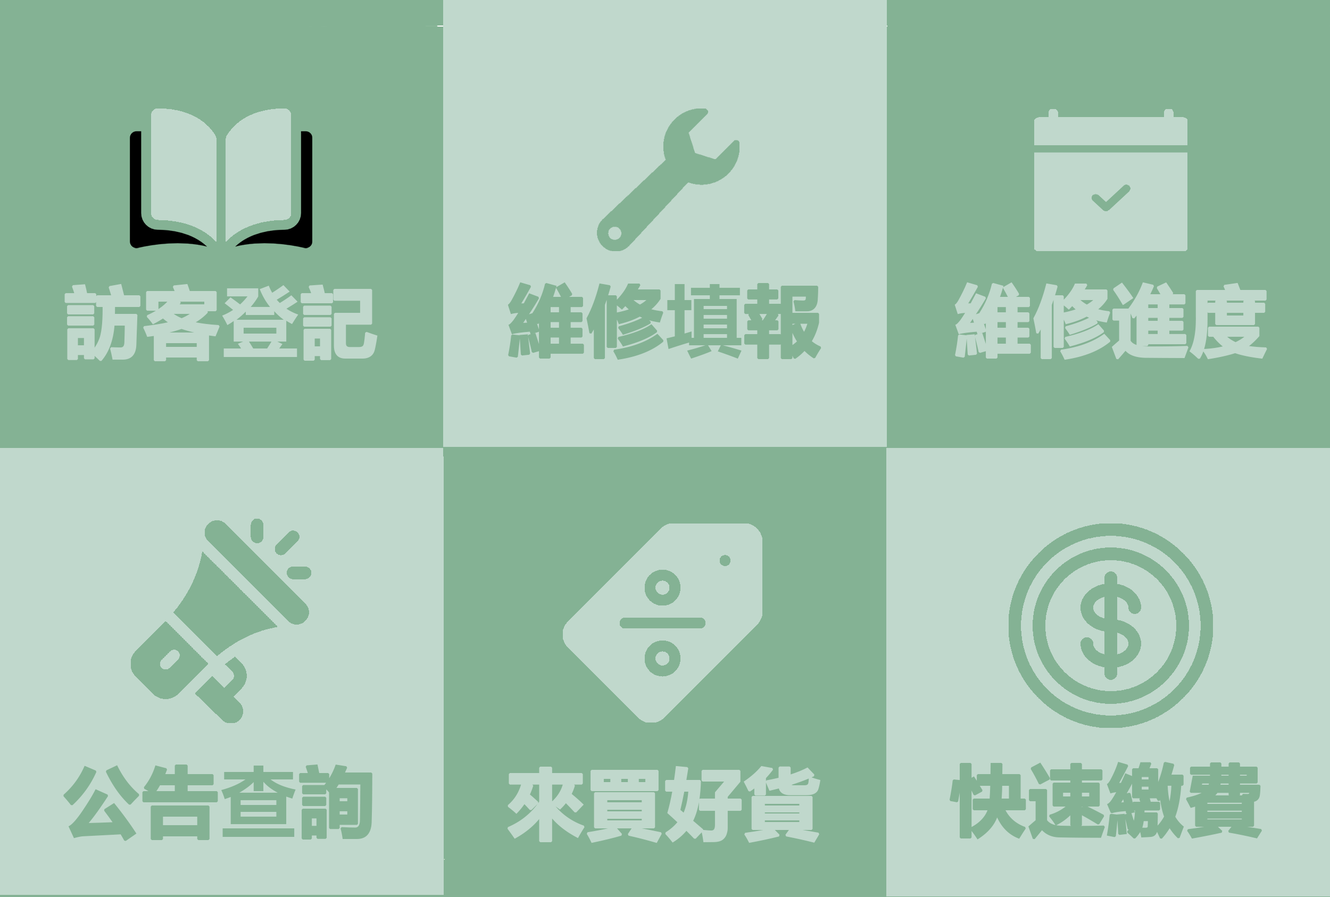
<style>
.page{position:relative;width:1330px;height:897px;background:#c0d8cc}
.page>*{position:absolute;margin:0}
.t1{font:76.6px "MicrosoftYaHei-Bold";color:#84b294;font-variant:small-caps;font-weight:bold}
.t2{font:76.6px "MicrosoftYaHei-Bold";color:#c0d8cc;font-variant:small-caps;font-weight:bold}
</style>
<div class="page">
<p class="t1" style="left:508px;top:282px;width:313px;height:78px">維修填報</p>
<p class="t2" style="left:954px;top:282px;width:313px;height:78px">維修進度</p>
<p class="t2" style="left:64px;top:283px;width:314px;height:78px">訪客登記</p>
<p class="t1" style="left:63px;top:764px;width:309px;height:77px">公告查詢</p>
<p class="t2" style="left:507px;top:765px;width:313px;height:78px">來買好貨</p>
</div>
